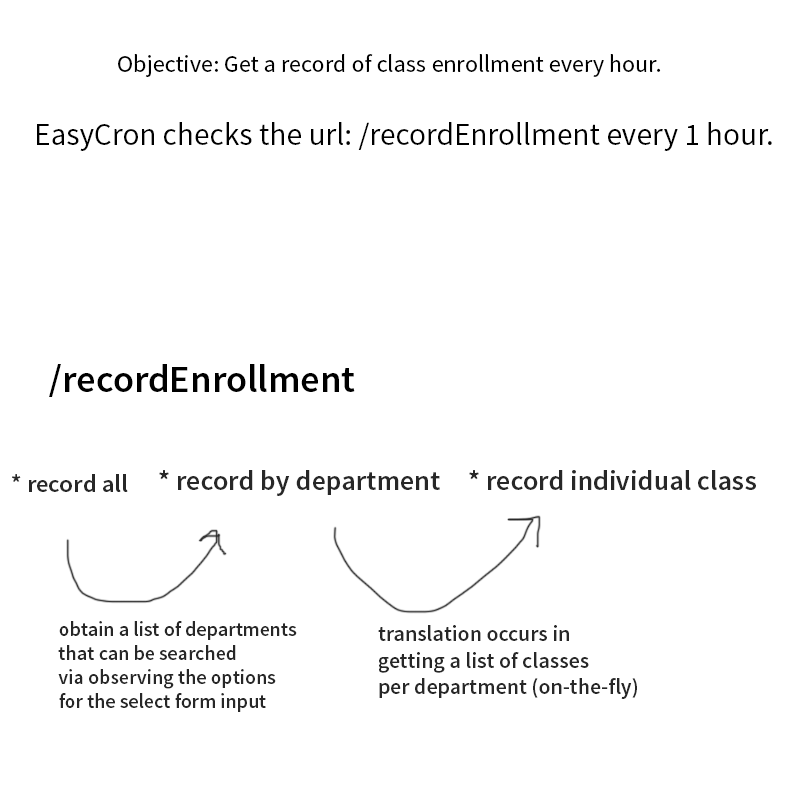
<style>
.page{position:relative;width:800px;height:800px;background:#ffffff}
.page>*{position:absolute;margin:0}
.t1{font:24.3px "SourceSansPro-Regular";color:#000000}
.t2{font:31.2px "SourceSansPro-Regular";color:#000000}
.t3{font:38px "SourceSansPro-Semibold";color:#000000}
.t4{font:27.9px "SourceSansPro-Semibold";color:#272727}
.t5{font:24.5px "SourceSansPro-Semibold";color:#272727}
.t6{font:20px "SourceSansPro-Semibold";color:#272727}
.t7{font:22px "SourceSansPro-Semibold";color:#272727}
</style>
<div class="page">
<p class="t1" style="left:118px;top:54px;width:543px;height:23px">Objective: Get a record of class enrollment every hour.</p>
<p class="t2" style="left:37px;top:122px;width:735px;height:29px">EasyCron checks the url: /recordEnrollment every 1 hour.</p>
<p class="t3" style="left:49px;top:364px;width:306px;height:33px">/recordEnrollment</p>
<p class="t4" style="left:159px;top:470px;width:281px;height:26px">* record by department</p>
<p class="t4" style="left:469px;top:470px;width:287px;height:20px">* record individual class</p>
<p class="t5" style="left:12px;top:474px;width:116px;height:18px">* record all</p>
<p class="t6" style="left:58px;top:621px;width:239px;height:91px">obtain a list of departments<br>that can be searched<br>via observing the options<br>for the select form input</p>
<p class="t7" style="left:378px;top:625px;width:259px;height:74px">translation occurs in<br>getting a list of classes<br>per department (on-the-fly)</p>
</div>
